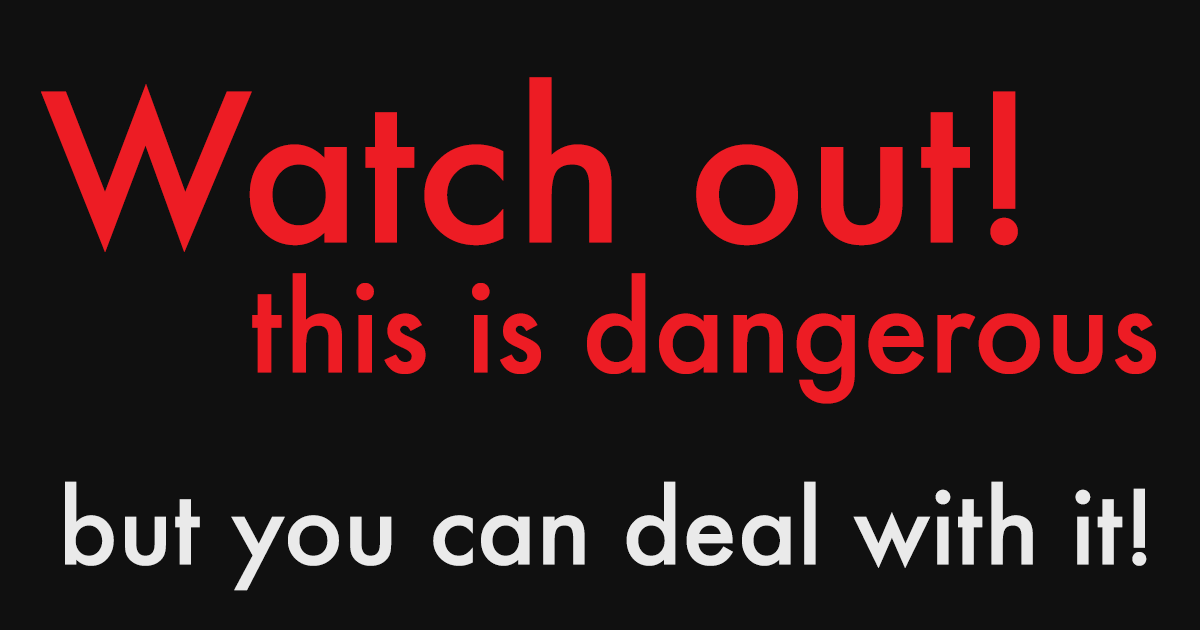
<style>
.page{position:relative;width:1200px;height:630px;background:#101010}
.page>*{position:absolute;margin:0}
.t1{font:200px "Futura-Medium";color:#ed1c24}
.t2{font:120px "Futura-Medium";color:#ed1c24}
.t3{font:100px "Futura-Medium";color:#eaeaea}
</style>
<div class="page">
<p class="t1" style="left:41px;top:77px;width:977px;height:175px">Watch out!</p>
<p class="t2" style="left:252px;top:273px;width:904px;height:131px">this is dangerous</p>
<p class="t3" style="left:65px;top:481px;width:1082px;height:110px">but you can deal with it!</p>
</div>
